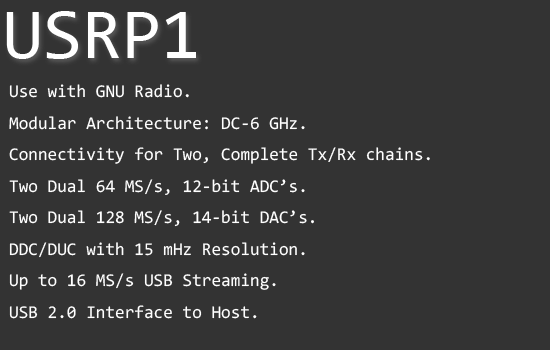
<style>
.page{position:relative;width:550px;height:350px;background:#333333}
.page>*{position:absolute;margin:0}
.t1{font:72px "Consolas";color:#ffffff}
.t2{font:18px "Consolas";color:#ffffff}
</style>
<div class="page">
<p class="t1" style="left:6px;top:11px;width:190px;height:48px">USRP1</p>
<p class="t2" style="left:9px;top:84px;width:421px;height:235px">Use with GNU Radio.<br>Modular Architecture: DC-6 GHz.<br>Connectivity for Two, Complete Tx/Rx chains.<br>Two Dual 64 MS/s, 12-bit ADC’s.<br>Two Dual 128 MS/s, 14-bit DAC’s.<br>DDC/DUC with 15 mHz Resolution.<br>Up to 16 MS/s USB Streaming.<br>USB 2.0 Interface to Host.</p>
</div>
